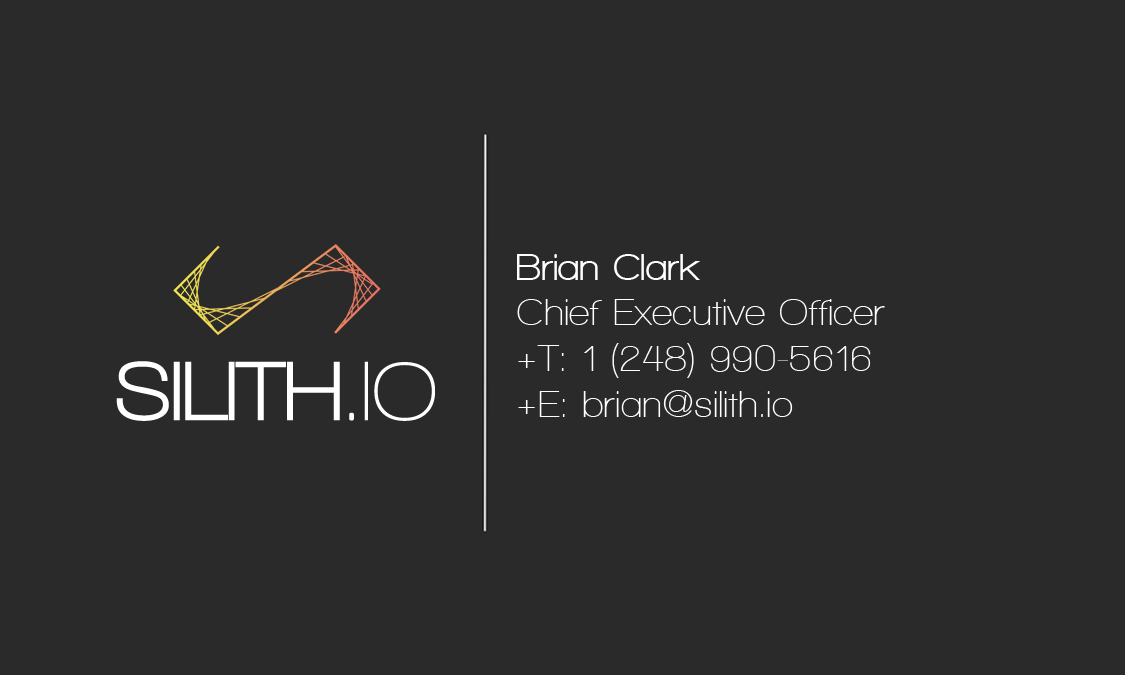
<style>
.page{position:relative;width:1125px;height:675px;background:#2a2a2a}
.page>*{position:absolute;margin:0}
.t1{font:38.1px "WalkwaySemiBold";color:#ffffff}
.t2{font:38.1px "WalkwayUltraBold";color:#ffffff}
.t3{font:86px "WalkwayUltraBold";color:#ffffff}
.t4{font:86px "WalkwayBold";color:#ffffff}
.t5{font:86px "WalkwaySemiBold";color:#ffffff}
</style>
<div class="page">
<p class="t1" style="left:517px;top:254px;width:368px;height:163px"><span class="t2">Brian Clark<br></span>Chief Executive Officer<br>+T: 1 (248) 990-5616<br>+E: brian@silith.io</p>
<p class="t3" style="left:116px;top:361px;width:319px;height:60px">SILITH<span class="t4">.</span><span class="t5">IO</span></p>
</div>
